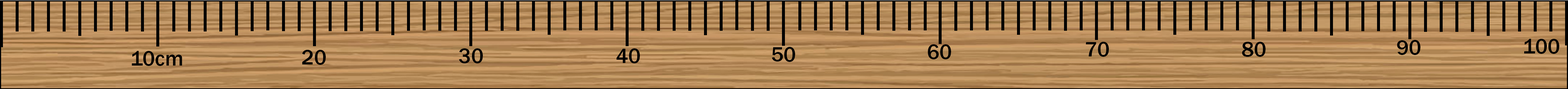
<style>
.page{position:relative;width:1568px;height:89px}
.page>*{position:absolute;margin:0}
.t1{font:21.3px "FranklinGothic-Medium";color:#000000}
</style>
<div class="page">
<p class="t1" style="left:1086px;top:42px;width:23px;height:14px">70</p>
<p class="t1" style="left:1242px;top:42px;width:24px;height:14px">80</p>
<p class="t1" style="left:1397px;top:40px;width:23px;height:15px">90</p>
<p class="t1" style="left:1524px;top:39px;width:35px;height:15px">100</p>
<p class="t1" style="left:132px;top:51px;width:50px;height:15px">10cm</p>
<p class="t1" style="left:302px;top:50px;width:24px;height:14px">20</p>
<p class="t1" style="left:459px;top:48px;width:24px;height:15px">30</p>
<p class="t1" style="left:617px;top:48px;width:23px;height:15px">40</p>
<p class="t1" style="left:772px;top:47px;width:23px;height:15px">50</p>
<p class="t1" style="left:928px;top:44px;width:23px;height:15px">60</p>
</div>
